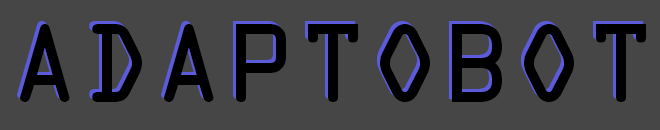
<style>
.page{position:relative;width:660px;height:130px;background:#464646}
.page>*{position:absolute;margin:0}
.t1{font:100px "OCRAStd";color:#000000}
</style>
<div class="page">
<p class="t1" style="left:17px;top:21px;width:626px;height:78px">ADAPTOBOT</p>
<p class="t1" style="left:20px;top:24px;width:626px;height:78px">ADAPTOBOT</p>
</div>
